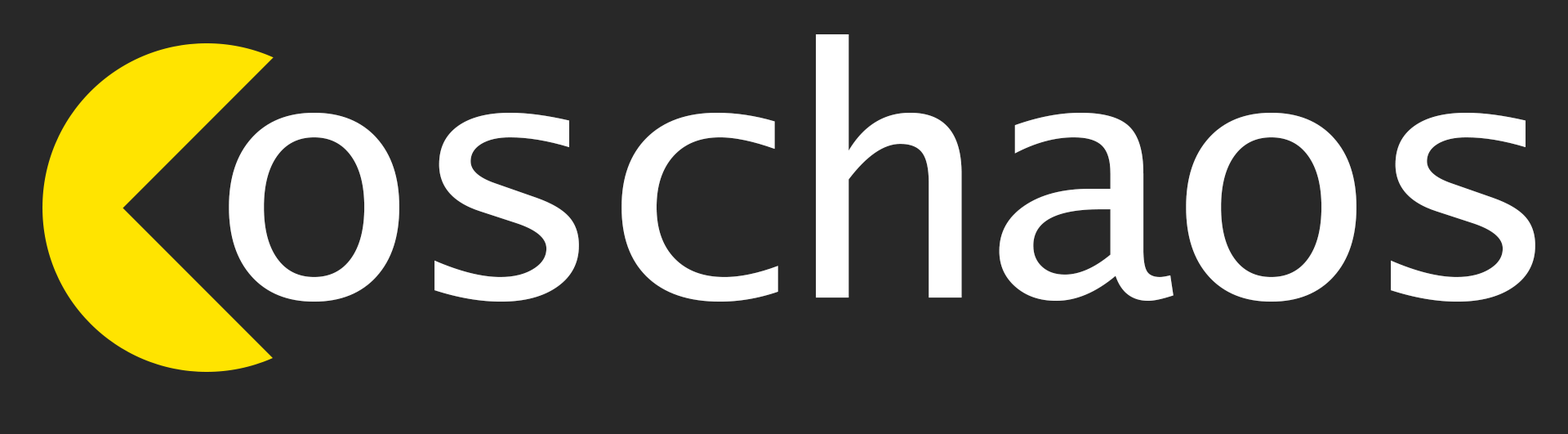
<style>
.page{position:relative;width:1568px;height:434px;background:#282828}
.page>*{position:absolute;margin:0}
.t1{font:340.2px "LucidaConsole";letter-spacing:-0.04em;color:#ffffff}
</style>
<div class="page">
<p class="t1" style="left:229px;top:34px;width:1306px;height:267px">oschaos</p>
</div>
